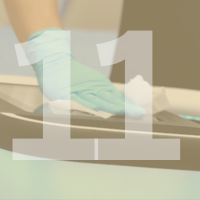
<style>
.page{position:relative;width:200px;height:200px}
.page>*{position:absolute;margin:0}
.t1{font:187.5px "PostGrotesk-Bold"}
.t2{font:187.5px "PostGrotesk-Bold";color:#c1bbac}
</style>
<div class="page">
<p class="t1" style="left:12px;top:30px;width:87px;height:130px">1</p>
<p class="t2" style="left:94px;top:30px;width:87px;height:130px">1</p>
</div>
